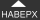
<style>
.page{position:relative;width:40px;height:20px;background:#333333}
.page>*{position:absolute;margin:0}
.t1{font:9px "ArialMT"}
</style>
<div class="page">
<p class="t1" style="left:2px;top:11px;width:36px;height:7px">НАВЕРХ</p>
</div>
